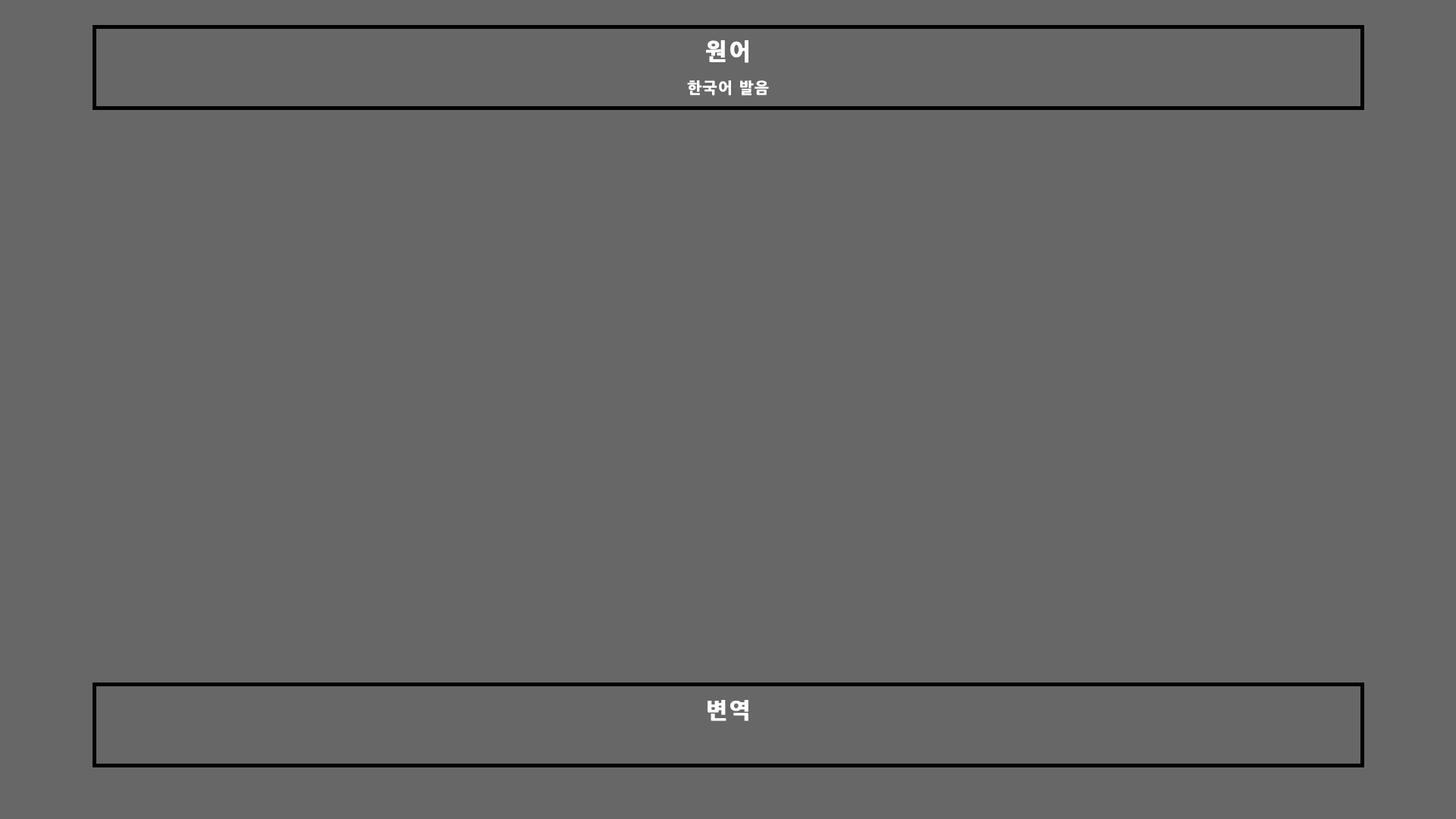
<style>
.page{position:relative;width:1456px;height:819px;background:#676767}
.page>*{position:absolute;margin:0}
.t1{font:15.2px "NanumGothicExtraBold";letter-spacing:0.05em;color:#ffffff;font-weight:bold}
.t2{font:22.7px "NanumGothicExtraBold";letter-spacing:0.05em;color:#ffffff;font-weight:bold}
</style>
<div class="page">
<p class="t1" style="left:687px;top:40px;width:82px;height:56px;text-align:center"><span class="t2">원어<br></span>한국어 발음</p>
<p class="t2" style="left:708px;top:700px;width:40px;height:21px">변역</p>
</div>
